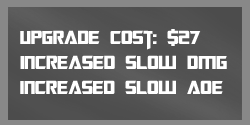
<style>
.page{position:relative;width:250px;height:125px}
.page>*{position:absolute;margin:0}
.t1{font:21px "TransformersMovie";color:#ffffff}
</style>
<div class="page">
<p class="t1" style="left:20px;top:29px;width:207px;height:65px">upgrade cost: $27<br>Increased slow DMG<br>increased slow AOE</p>
</div>
